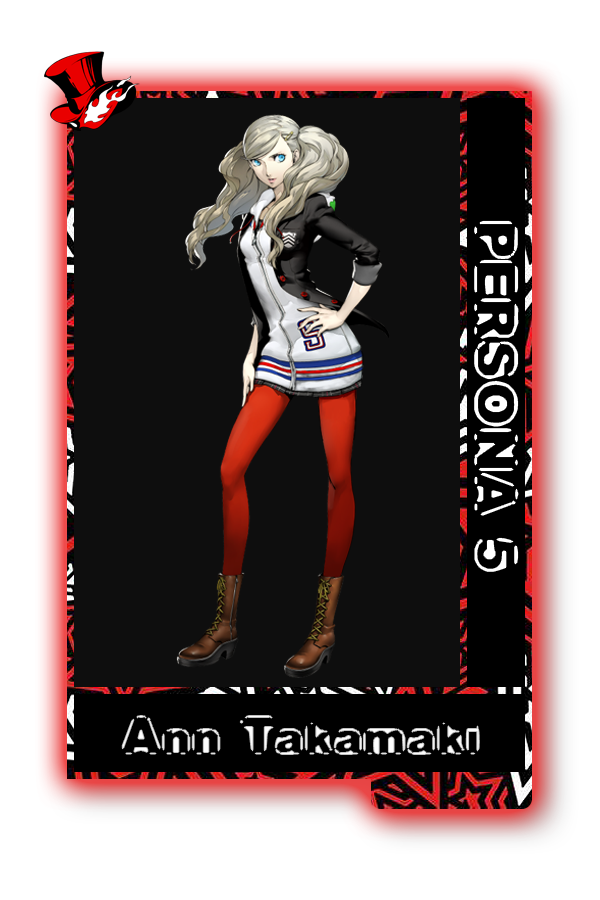
<style>
.page{position:relative;width:600px;height:900px;background:#0e0e0e}
.page>*{position:absolute;margin:0}
.t1{font:41.7px "Untitled";color:#ffffff}
.t2{font:37.5px "Untitled";color:#fdfdfd}
</style>
<div class="page">
<p class="t1" style="left:475px;top:221px;width:43px;height:350px;rotate:90deg">PERSONA 5</p>
<p class="t2" style="left:122px;top:716px;width:357px;height:38px">Ann Takamaki</p>
</div>
